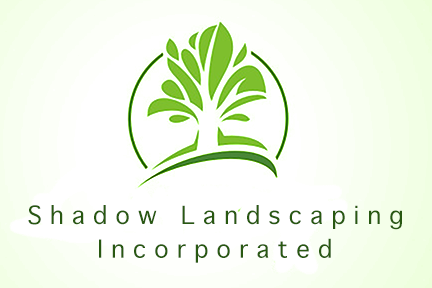
<style>
.page{position:relative;width:432px;height:288px;background:#ffffff}
.page>*{position:absolute;margin:0}
.t1{font:24px "Geneva";color:#285811}
</style>
<div class="page">
<p class="t1" style="left:28px;top:205px;width:374px;height:25px">S h a d o w   L a n d s c a p i n g</p>
<p class="t1" style="left:99px;top:238px;width:232px;height:25px">I n c o r p o r a t e d</p>
</div>
